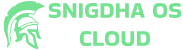
<style>
.page{position:relative;width:183px;height:50px;background:#ffffff}
.page>*{position:absolute;margin:0}
.t1{font:23px "BakbakOne-Regular";color:#74e291}
</style>
<div class="page">
<p class="t1" style="left:48px;top:3px;width:134px;height:43px;text-align:center">SNIGDHA OS <br>CLOUD</p>
</div>
